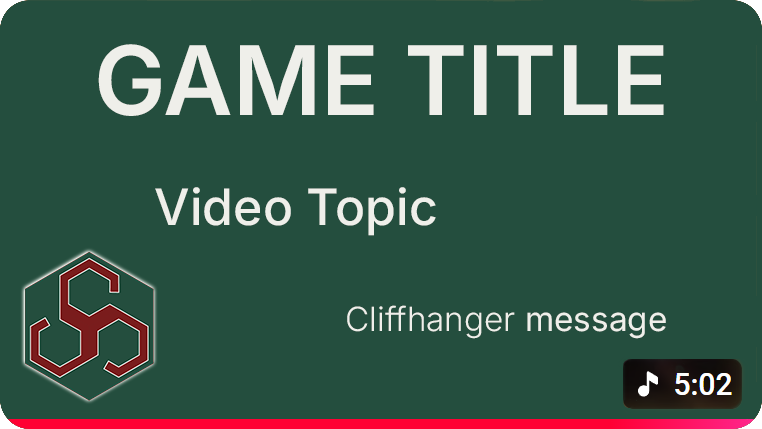
<style>
.page{position:relative;width:762px;height:429px;background:#244e3e}
.page>*{position:absolute;margin:0}
.t1{font:95.8px "Inter-SemiBold";color:#efefea}
.t2{font:50px "Inter-Medium";color:#efefea}
.t3{font:33.3px "Inter-Light";color:#efefea}
.t4{font:33.3px "Inter-Regular";color:#efefea}
</style>
<div class="page">
<p class="t1" style="left:98px;top:44px;width:566px;height:72px">GAME TITLE</p>
<p class="t2" style="left:155px;top:187px;width:281px;height:49px">Video Topic</p>
<p class="t3" style="left:347px;top:305px;width:319px;height:34px">Cliffhanger<span class="t4"> message</span></p>
</div>
